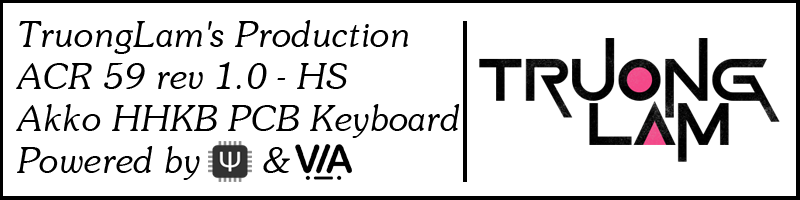
<style>
.page{position:relative;width:800px;height:200px;background:#ffffff}
.page>*{position:absolute;margin:0}
.t1{font:35px "UVNSaigonItalic";color:#000000}
</style>
<div class="page">
<p class="t1" style="left:16px;top:20px;width:444px;height:160px">TruongLam's Production<br>ACR 59 rev 1.0 - HS<br>Akko HHKB PCB Keyboard<br>Powered by      &amp;</p>
</div>
